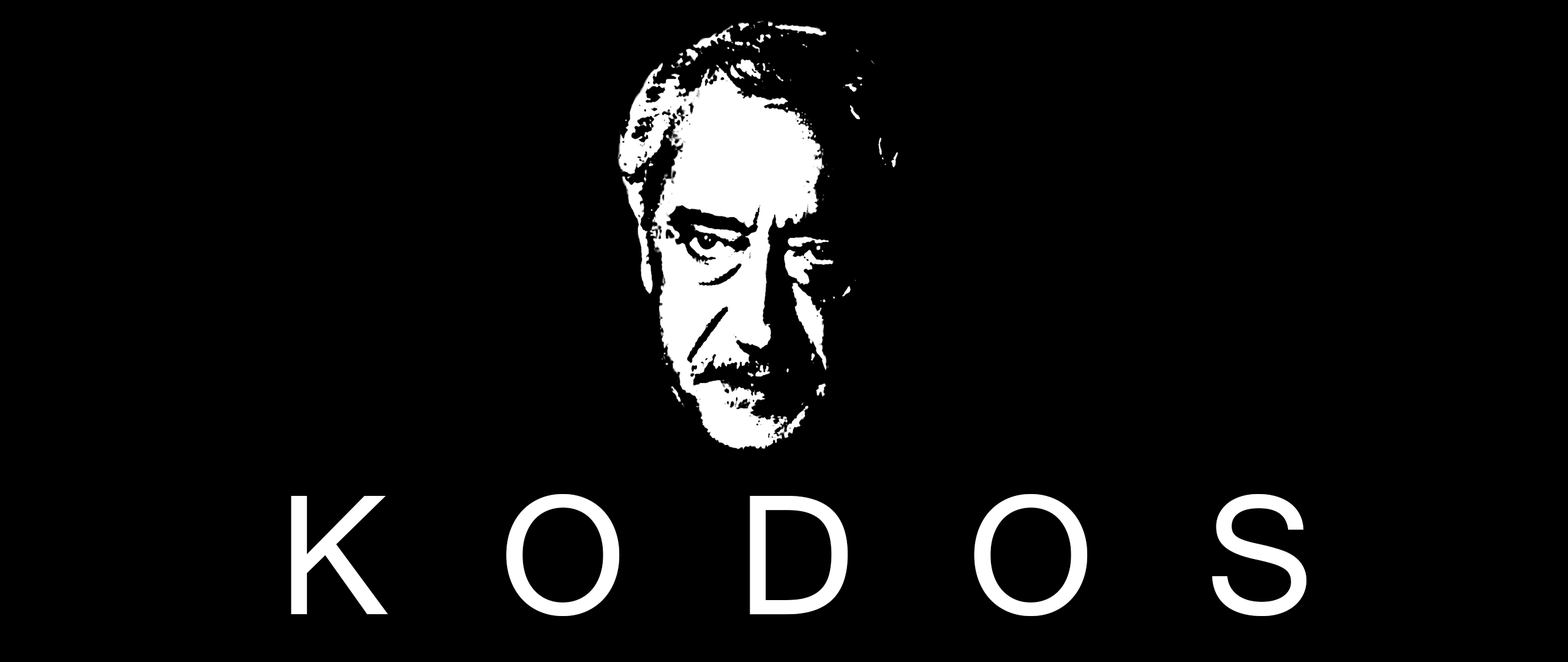
<style>
.page{position:relative;width:1568px;height:662px;background:#000000}
.page>*{position:absolute;margin:0}
.t1{font:183.8px "Vrinda";letter-spacing:0.6em;color:#ffffff}
</style>
<div class="page">
<p class="t1" style="left:291px;top:494px;width:1015px;height:122px">KODOS</p>
</div>
